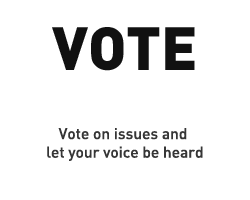
<style>
.page{position:relative;width:250px;height:200px;background:#ffffff}
.page>*{position:absolute;margin:0}
.t1{font:60px "DIN-Black";color:#111111}
.t2{font:15.5px "DIN-Medium";color:#363636}
</style>
<div class="page">
<p class="t1" style="left:52px;top:27px;width:143px;height:44px">VOTE</p>
<p class="t2" style="left:47px;top:128px;width:156px;height:33px;text-align:center">Vote on issues and <br>let your voice be heard</p>
</div>
